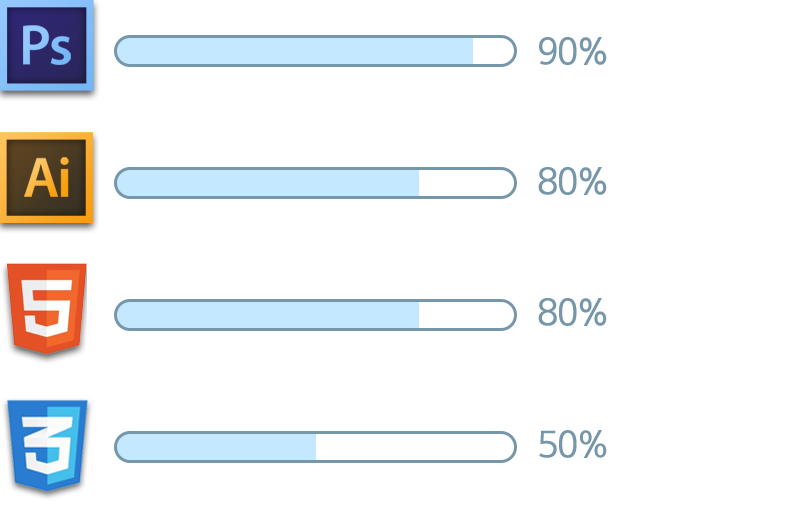
<style>
.page{position:relative;width:799px;height:509px;background:#ffffff}
.page>*{position:absolute;margin:0}
.t1{font:35px "HancomGothicRegular";letter-spacing:-0.04em;color:#7696aa;font-weight:bold}
</style>
<div class="page">
<p class="t1" style="left:539px;top:37px;width:68px;height:28px">90%</p>
<p class="t1" style="left:538px;top:167px;width:69px;height:28px">80%</p>
<p class="t1" style="left:538px;top:298px;width:69px;height:28px">80%</p>
<p class="t1" style="left:539px;top:430px;width:68px;height:28px">50%</p>
</div>
